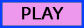
<style>
.page{position:relative;width:84px;height:28px;background:#ee98ed}
.page>*{position:absolute;margin:0}
.t1{font:17px "Verdana";color:#000000;font-weight:bold}
</style>
<div class="page">
<p class="t1" style="left:22px;top:7px;width:42px;height:13px">PLAY</p>
</div>
